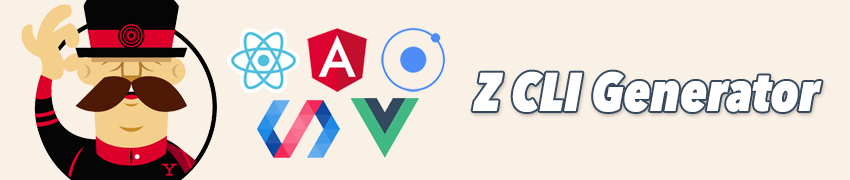
<style>
.page{position:relative;width:850px;height:180px;background:#faf1e6}
.page>*{position:absolute;margin:0}
.t1{font:53.6px "AvenirNextCondensed-HeavyItalic";color:#ffffff}
</style>
<div class="page">
<p class="t1" style="left:472px;top:71px;width:350px;height:41px">Z CLI Generator</p>
</div>
